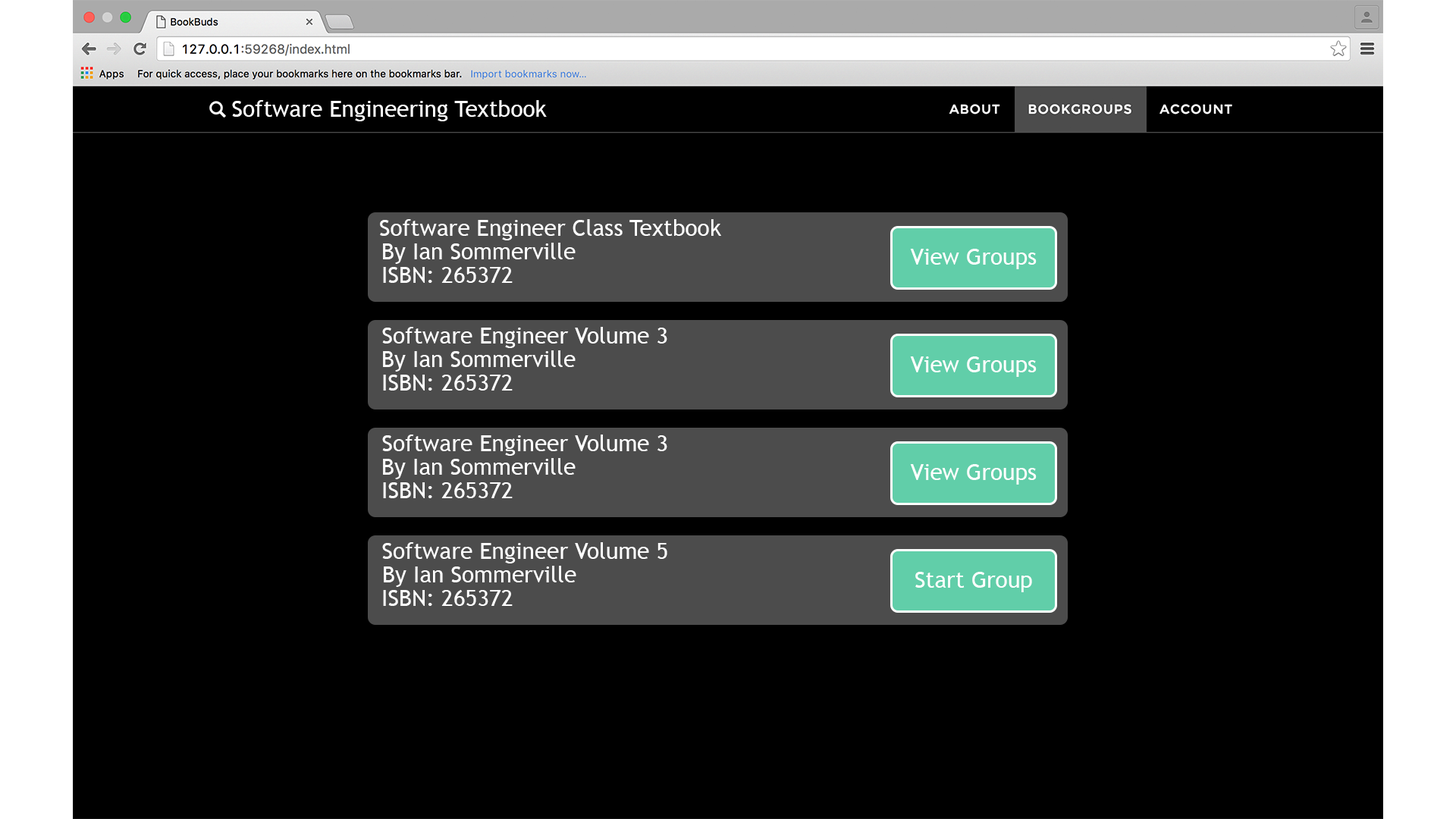
<style>
.page{position:relative;width:1456px;height:819px;background:#000000}
.page>*{position:absolute;margin:0}
.t1{font:22.7px "TrebuchetMS";color:#ffffff}
</style>
<div class="page">
<p class="t1" style="left:232px;top:100px;width:315px;height:21px">Software Engineering Textbook</p>
<p class="t1" style="left:380px;top:219px;width:341px;height:21px">Software Engineer Class Textbook</p>
<p class="t1" style="left:383px;top:243px;width:193px;height:21px">By Ian Sommerville</p>
<p class="t1" style="left:910px;top:249px;width:127px;height:20px">View Groups</p>
<p class="t1" style="left:383px;top:267px;width:130px;height:16px">ISBN: 265372</p>
<p class="t1" style="left:382px;top:327px;width:285px;height:21px">Software Engineer Volume 3</p>
<p class="t1" style="left:383px;top:350px;width:193px;height:22px">By Ian Sommerville</p>
<p class="t1" style="left:910px;top:356px;width:127px;height:21px">View Groups</p>
<p class="t1" style="left:383px;top:375px;width:130px;height:16px">ISBN: 265372</p>
<p class="t1" style="left:382px;top:435px;width:285px;height:21px">Software Engineer Volume 3</p>
<p class="t1" style="left:383px;top:458px;width:193px;height:21px">By Ian Sommerville</p>
<p class="t1" style="left:910px;top:464px;width:127px;height:21px">View Groups</p>
<p class="t1" style="left:383px;top:482px;width:130px;height:16px">ISBN: 265372</p>
<p class="t1" style="left:382px;top:542px;width:285px;height:21px">Software Engineer Volume 5</p>
<p class="t1" style="left:384px;top:566px;width:192px;height:21px">By Ian Sommerville</p>
<p class="t1" style="left:915px;top:572px;width:117px;height:20px">Start Group</p>
<p class="t1" style="left:383px;top:590px;width:130px;height:16px">ISBN: 265372</p>
</div>
